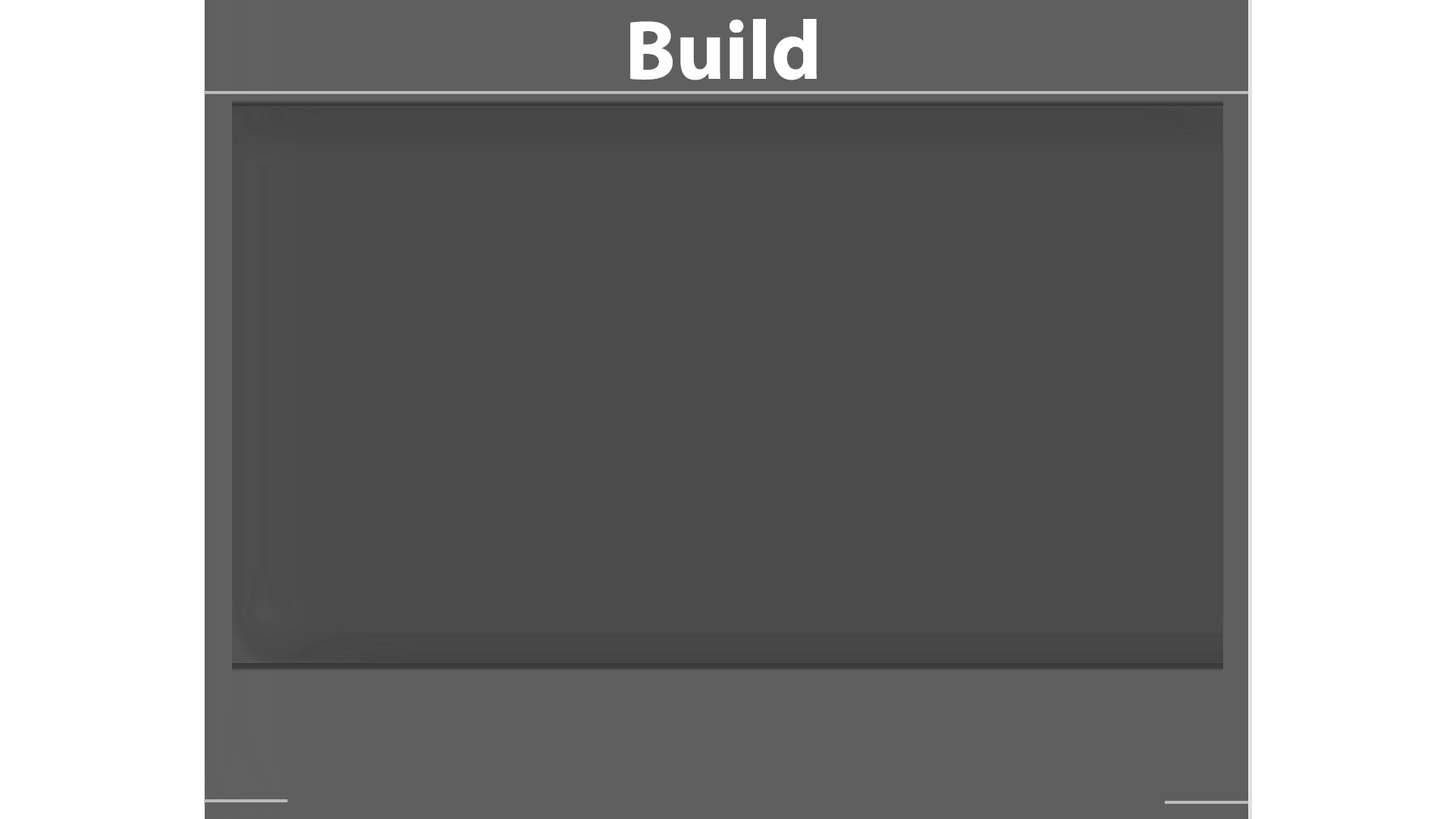
<style>
.page{position:relative;width:1456px;height:819px;background:#4c4c4c}
.page>*{position:absolute;margin:0}
.t1{font:84.3px "MyriadPro-Bold";color:#ffffff}
</style>
<div class="page">
<p class="t1" style="left:630px;top:19px;width:187px;height:61px">Build</p>
</div>
